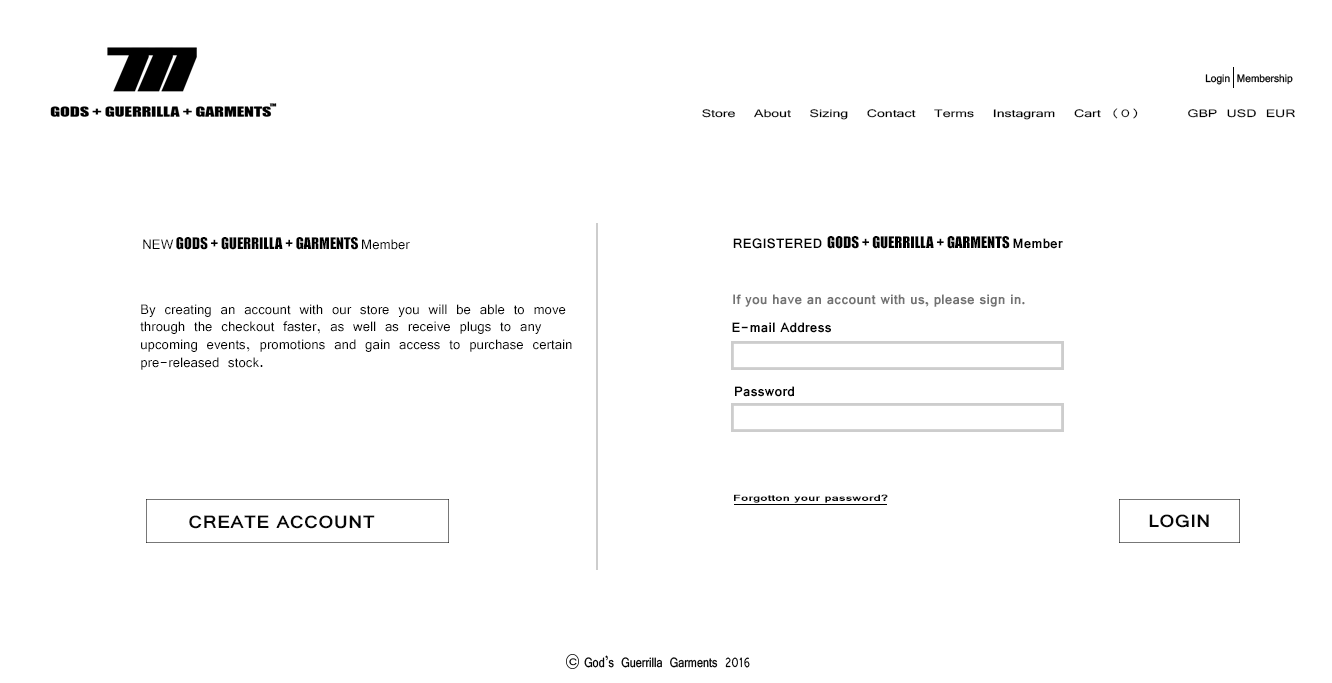
<style>
.page{position:relative;width:1332px;height:683px;background:#ffffff}
.page>*{position:absolute;margin:0}
.t1{font:11.7px "Vrinda";color:#000000;scale:1.35 1}
.t2{font:14.8px "Impact";color:#020202}
.t3{font:14.8px "Vrinda";color:#020202}
.t4{font:14.8px "Vrinda-Bold";color:#020202}
.t5{font:14.8px "Vrinda-Bold";color:#727272}
.t6{font:9.6px "Vrinda-Bold";color:#070707;scale:1.45 1}
.t7{font:19.1px "Vrinda-Bold";color:#070707;scale:1.12 1}
</style>
<div class="page">
<p class="t1" style="left:702px;top:108px;width:593px;height:12px">Store  About  Sizing  Contact  Terms  Instagram  Cart (0)     GBP USD EUR</p>
<p class="t2" style="left:143px;top:237px;width:267px;height:13px"><span class="t3">NEW</span> GODS + GUERRILLA + GARMENTS <span class="t3">Member</span></p>
<p class="t2" style="left:733px;top:236px;width:330px;height:13px"><span class="t4">REGISTERED </span>GODS + GUERRILLA + GARMENTS <span class="t4">Member</span></p>
<p class="t5" style="left:733px;top:294px;width:292px;height:13px">If you have an account with us, please sign in.</p>
<p class="t3" style="left:140px;top:304px;width:432px;height:66px">By creating an account with our store you will be able to move<br>through the checkout faster, as well as receive plugs to any<br>upcoming events, promotions and gain access to purchase certain<br>pre-released stock.</p>
<p class="t4" style="left:732px;top:322px;width:99px;height:11px">E-mail Address</p>
<p class="t4" style="left:735px;top:386px;width:59px;height:11px">Password</p>
<p class="t6" style="left:734px;top:494px;width:154px;height:9px">Forgotton your password?</p>
<p class="t7" style="left:189px;top:515px;width:186px;height:14px">CREATE ACCOUNT</p>
<p class="t7" style="left:1149px;top:514px;width:60px;height:14px">LOGIN</p>
</div>
